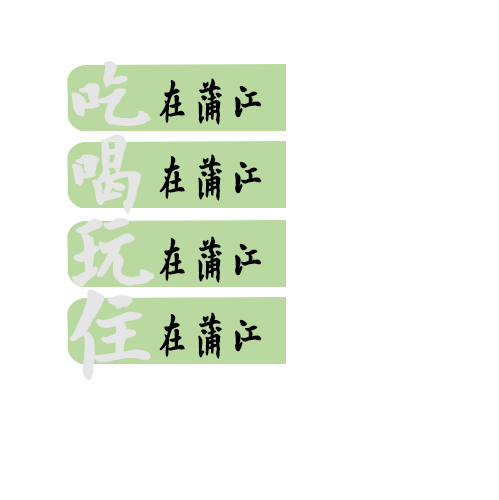
<style>
.page{position:relative;width:499px;height:500px;background:#ffffff}
.page>*{position:absolute;margin:0}
.t1{font:106px "FZZJ-ZZGKTFONT";letter-spacing:0.052em;color:#e5e5e5;text-transform:uppercase;font-weight:bold;scale:0.88 1}
.t2{font:51.1px "FZZJ-ZZGKTFONT";letter-spacing:0.052em;color:#000000;text-transform:uppercase;font-weight:bold;scale:0.69 1}
.t3{font:102.8px "FZZJ-ZZGKTFONT";letter-spacing:0.052em;color:#e5e5e5;text-transform:uppercase;font-weight:bold;scale:0.84 1}
.t4{font:117.5px "FZZJ-ZZGKTFONT";letter-spacing:0.052em;color:#e5e5e5;text-transform:uppercase;font-weight:bold;scale:0.75 1}
.t5{font:124.5px "FZZJ-ZZGKTFONT";letter-spacing:0.052em;color:#e5e5e5;text-transform:uppercase;font-weight:bold;scale:0.81 1}
</style>
<div class="page">
<p class="t1" style="left:71px;top:61px;width:80px;height:65px">吃</p>
<p class="t2" style="left:159px;top:78px;width:103px;height:47px">在蒲江</p>
<p class="t3" style="left:71px;top:134px;width:71px;height:80px">喝</p>
<p class="t2" style="left:159px;top:154px;width:103px;height:47px">在蒲江</p>
<p class="t4" style="left:72px;top:218px;width:83px;height:69px">玩</p>
<p class="t2" style="left:159px;top:236px;width:103px;height:47px">在蒲江</p>
<p class="t5" style="left:69px;top:289px;width:82px;height:91px">住</p>
<p class="t2" style="left:159px;top:312px;width:103px;height:47px">在蒲江</p>
</div>
